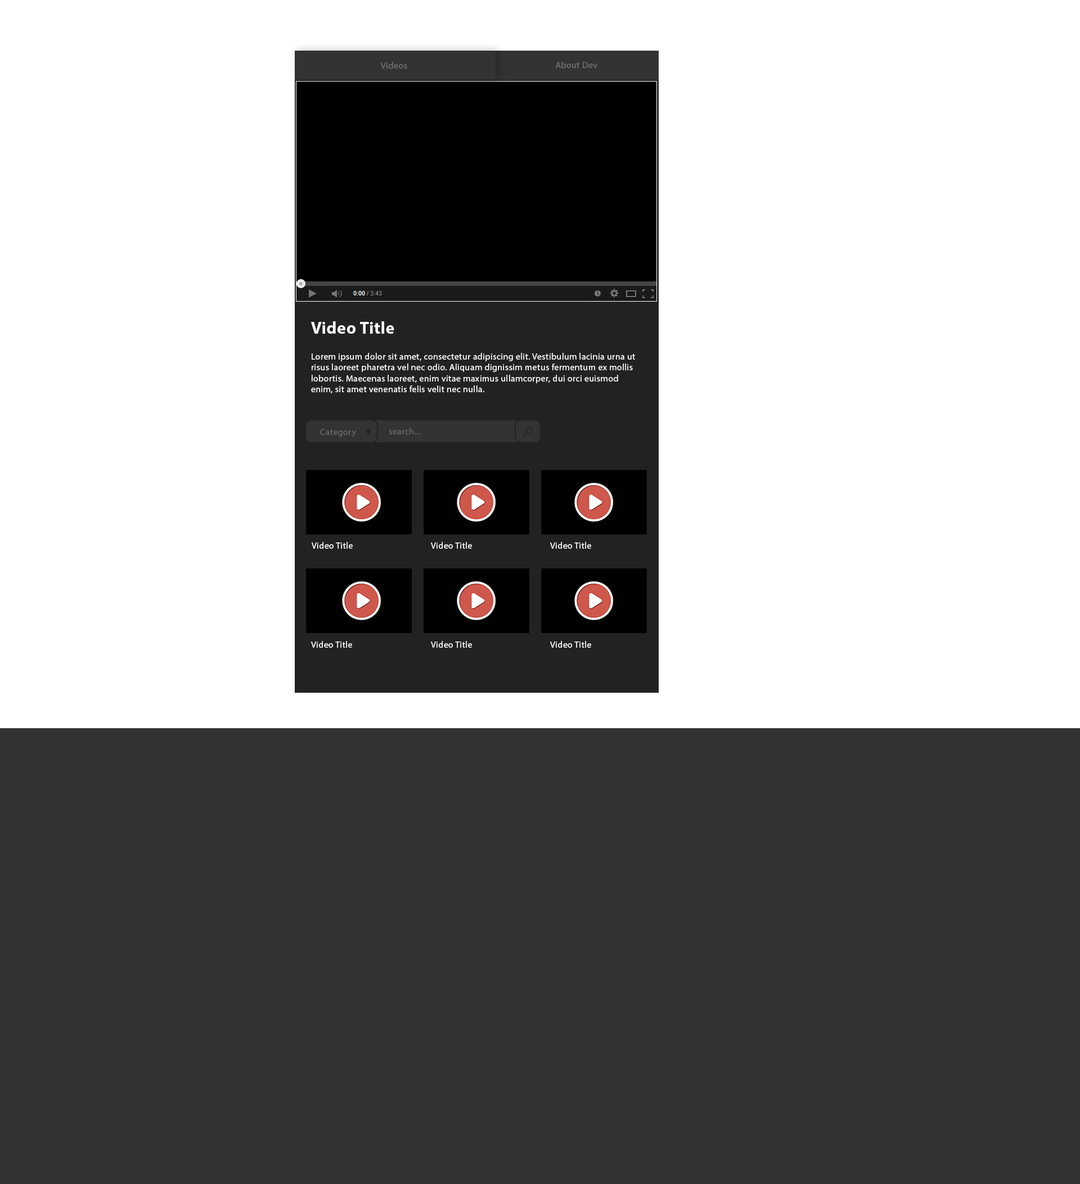
<style>
.page{position:relative;width:1080px;height:1184px;background:#ffffff}
.page>*{position:absolute;margin:0}
.t1{font:9px "MyriadPro-Regular";letter-spacing:0.025em;color:#727272}
.t2{font:16.9px "MyriadPro-Bold";letter-spacing:0.025em;color:#ffffff}
.t3{font:9px "MyriadPro-Regular";letter-spacing:0.025em;color:#ffffff}
.t4{font:9px "MyriadPro-Regular";letter-spacing:0.025em;color:#696969}
</style>
<div class="page">
<p class="t1" style="left:381px;top:62px;width:26px;height:7px">Videos</p>
<p class="t1" style="left:555px;top:61px;width:42px;height:7px">About Dev</p>
<p class="t2" style="left:311px;top:321px;width:83px;height:13px">Video Title</p>
<p class="t3" style="left:311px;top:353px;width:324px;height:40px">Lorem ipsum dolor sit amet, consectetur adipiscing elit. Vestibulum lacinia urna ut risus laoreet pharetra vel nec odio. Aliquam dignissim metus fermentum ex mollis lobortis. Maecenas laoreet, enim vitae maximus ullamcorper, dui orci euismod enim, sit amet venenatis felis velit nec nulla.</p>
<p class="t4" style="left:320px;top:429px;width:36px;height:8px">Category</p>
<p class="t4" style="left:389px;top:428px;width:31px;height:6px">search...</p>
<p class="t3" style="left:312px;top:542px;width:41px;height:6px">Video Title</p>
<p class="t3" style="left:431px;top:542px;width:41px;height:6px">Video Title</p>
<p class="t3" style="left:550px;top:542px;width:41px;height:6px">Video Title</p>
<p class="t3" style="left:311px;top:641px;width:41px;height:6px">Video Title</p>
<p class="t3" style="left:431px;top:641px;width:41px;height:6px">Video Title</p>
<p class="t3" style="left:550px;top:641px;width:41px;height:6px">Video Title</p>
</div>
